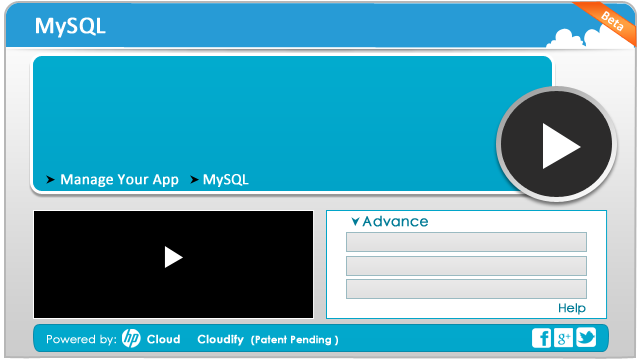
<style>
.page{position:relative;width:640px;height:360px}
.page>*{position:absolute;margin:0}
.t1{font:24px "Calibri";color:#ffffff;font-weight:bold}
.t2{font:13px "Calibri";color:#ffffff;font-weight:bold}
.t3{font:15.5px "Calibri";color:#ffffff;font-weight:bold}
.t4{font:14px "CenturyGothic";color:#007b96;font-weight:bold}
.t5{font:12px "CenturyGothic";color:#007b96;font-weight:bold}
.t6{font:11px "CenturyGothic-Bold";color:#ffffff;font-weight:bold}
.t7{font:11px "CenturyGothic";color:#ffffff;font-weight:bold}
.t8{font:10px "CenturyGothic-Bold";color:#ffffff;font-weight:bold}
</style>
<div class="page">
<p class="t1" style="left:36px;top:17px;width:70px;height:21px">MySQL</p>
<p class="t2" style="left:601px;top:11px;width:23px;height:21px;rotate:35deg">Beta</p>
<p class="t3" style="left:61px;top:174px;width:188px;height:13px">Manage Your App      MySQL</p>
<p class="t4" style="left:362px;top:215px;width:66px;height:12px">Advance</p>
<p class="t5" style="left:559px;top:303px;width:27px;height:12px">Help</p>
<p class="t6" style="left:47px;top:334px;width:291px;height:12px"><span class="t7">Powered by:         </span>Cloud     Cloudify  <span class="t8">(Patent Pending )</span></p>
</div>
